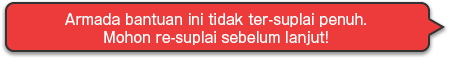
<style>
.page{position:relative;width:450px;height:58px;background:#ed3b3b}
.page>*{position:absolute;margin:0}
.t1{font:14px/18px "GothicMB101Pro-Regular";color:#ffffff}
</style>
<div class="page">
<p class="t1" style="left:65px;top:13px;width:301px;height:32px;text-align:center">Armada bantuan ini tidak ter-suplai penuh.<br>Mohon re-suplai sebelum lanjut!</p>
</div>
